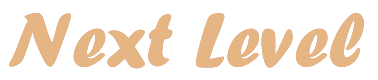
<style>
.page{position:relative;width:378px;height:80px;background:#ffffff}
.page>*{position:absolute;margin:0}
.t1{font:80px "ForteMT";color:#e5b684}
</style>
<div class="page">
<p class="t1" style="left:9px;top:13px;width:355px;height:56px">Next Level</p>
<p class="t1" style="left:9px;top:13px;width:355px;height:56px">Next Level</p>
</div>
